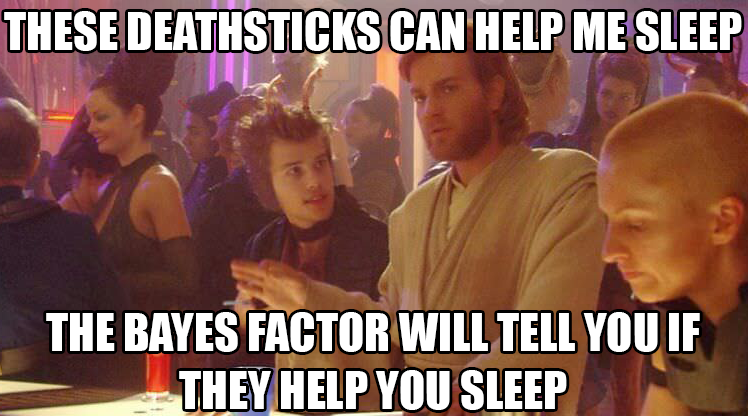
<style>
.page{position:relative;width:748px;height:416px}
.page>*{position:absolute;margin:0}
.t1{font:48px "Impact";color:#ffffff}
</style>
<div class="page">
<p class="t1" style="left:4px;top:11px;width:738px;height:40px">THESE DEATHSTICKS CAN HELP ME SLEEP</p>
<p class="t1" style="left:46px;top:312px;width:654px;height:98px;text-align:center">THE BAYES FACTOR WILL TELL YOU IF THEY HELP YOU SLEEP</p>
</div>
